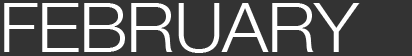
<style>
.page{position:relative;width:412px;height:56px;background:#333333}
.page>*{position:absolute;margin:0}
.t1{font:67.7px "HelveticaNeueLTCom-Lt";letter-spacing:-0.02em;color:#ffffff;scale:1.08 1}
</style>
<div class="page">
<p class="t1" style="left:4px;top:3px;width:356px;height:50px">FEBRUARY</p>
</div>
